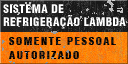
<style>
.page{position:relative;width:128px;height:64px}
.page>*{position:absolute;margin:0}
.t1{font:11.5px/13px "HelveticaLT-Condensed-Black";letter-spacing:0.04em;color:#ffffff}
.t2{font:11px/14px "HelveticaLT-Condensed-Black";letter-spacing:0.13em;color:#000000}
</style>
<div class="page">
<p class="t1" style="left:3px;top:4px;width:123px;height:25px">SISTEMA DE<br>REFRIGERAÇÃO LAMBDA</p>
<p class="t2" style="left:9px;top:37px;width:107px;height:22px">SOMENTE PESSOAL<br>AUTORIZADO</p>
</div>
